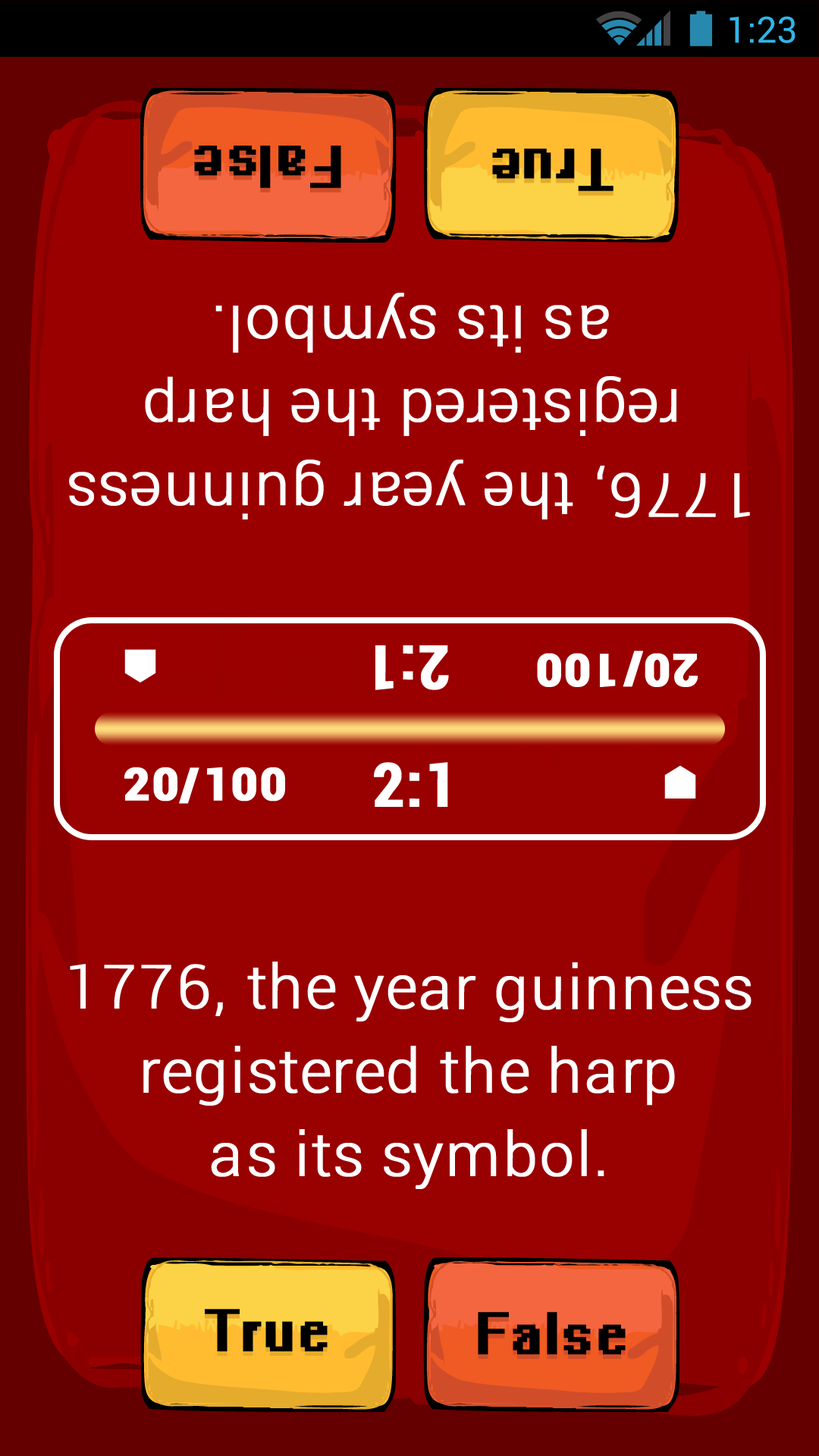
<style>
.page{position:relative;width:819px;height:1456px;background:#9b0000}
.page>*{position:absolute;margin:0}
.t1{font:36.4px "Roboto-Regular";color:#31b6e7}
.t2{font:53.1px "System";letter-spacing:0.02em;color:#000000;font-weight:bold}
.t3{font:60.7px/83.6px "Roboto-Light";letter-spacing:0.02em;color:#ffffff;font-weight:bold}
.t4{font:60.7px "Roboto-BoldCondensed";letter-spacing:0.02em;color:#ffffff;font-weight:bold}
.t5{font:45.5px "Roboto-Black";letter-spacing:0.02em;color:#ffffff;font-weight:bold}
</style>
<div class="page">
<p class="t1" style="left:730px;top:16px;width:65px;height:27px">1:23</p>
<p class="t2" style="left:194px;top:146px;width:147px;height:42px;rotate:180deg">False</p>
<p class="t2" style="left:492px;top:149px;width:121px;height:42px;rotate:180deg">True</p>
<p class="t3" style="left:69px;top:293px;width:681px;height:226px;text-align:center;rotate:-180deg">1776, the year guinness<br>registered the harp<br>as its symbol.</p>
<p class="t4" style="left:375px;top:645px;width:74px;height:45px;rotate:-180deg">2:1</p>
<p class="t5" style="left:537px;top:651px;width:161px;height:36px;rotate:-180deg">20/100</p>
<p class="t5" style="left:124px;top:767px;width:161px;height:37px">20/100</p>
<p class="t4" style="left:374px;top:762px;width:74px;height:45px">2:1</p>
<p class="t3" style="left:70px;top:962px;width:681px;height:227px;text-align:center">1776, the year guinness<br>registered the harp<br>as its symbol.</p>
<p class="t2" style="left:205px;top:1309px;width:123px;height:42px">True</p>
<p class="t2" style="left:478px;top:1312px;width:148px;height:42px">False</p>
</div>
